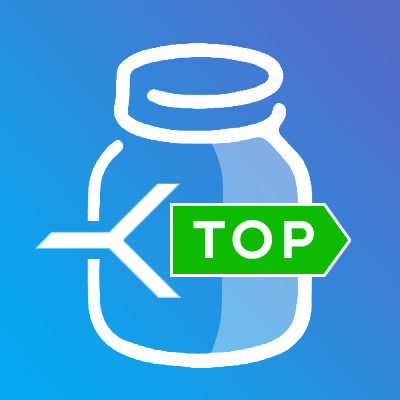
<style>
.page{position:relative;width:400px;height:400px}
.page>*{position:absolute;margin:0}
.t1{font:53px "ElmsSans-ExtraBold";letter-spacing:0.12em;color:#ffffff}
</style>
<div class="page">
<p class="t1" style="left:193px;top:220px;width:121px;height:39px">TOP</p>
</div>
